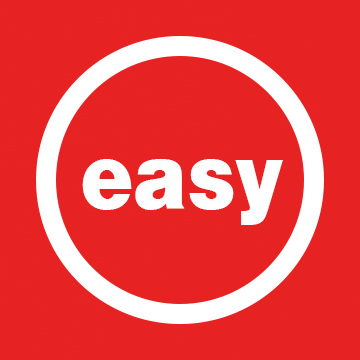
<style>
.page{position:relative;width:360px;height:360px;background:#e72222}
.page>*{position:absolute;margin:0}
.t1{font:91.6px "HeliosBlack";color:#ffffff;scale:0.87 1}
</style>
<div class="page">
<p class="t1" style="left:82px;top:159px;width:201px;height:66px">easy</p>
</div>
